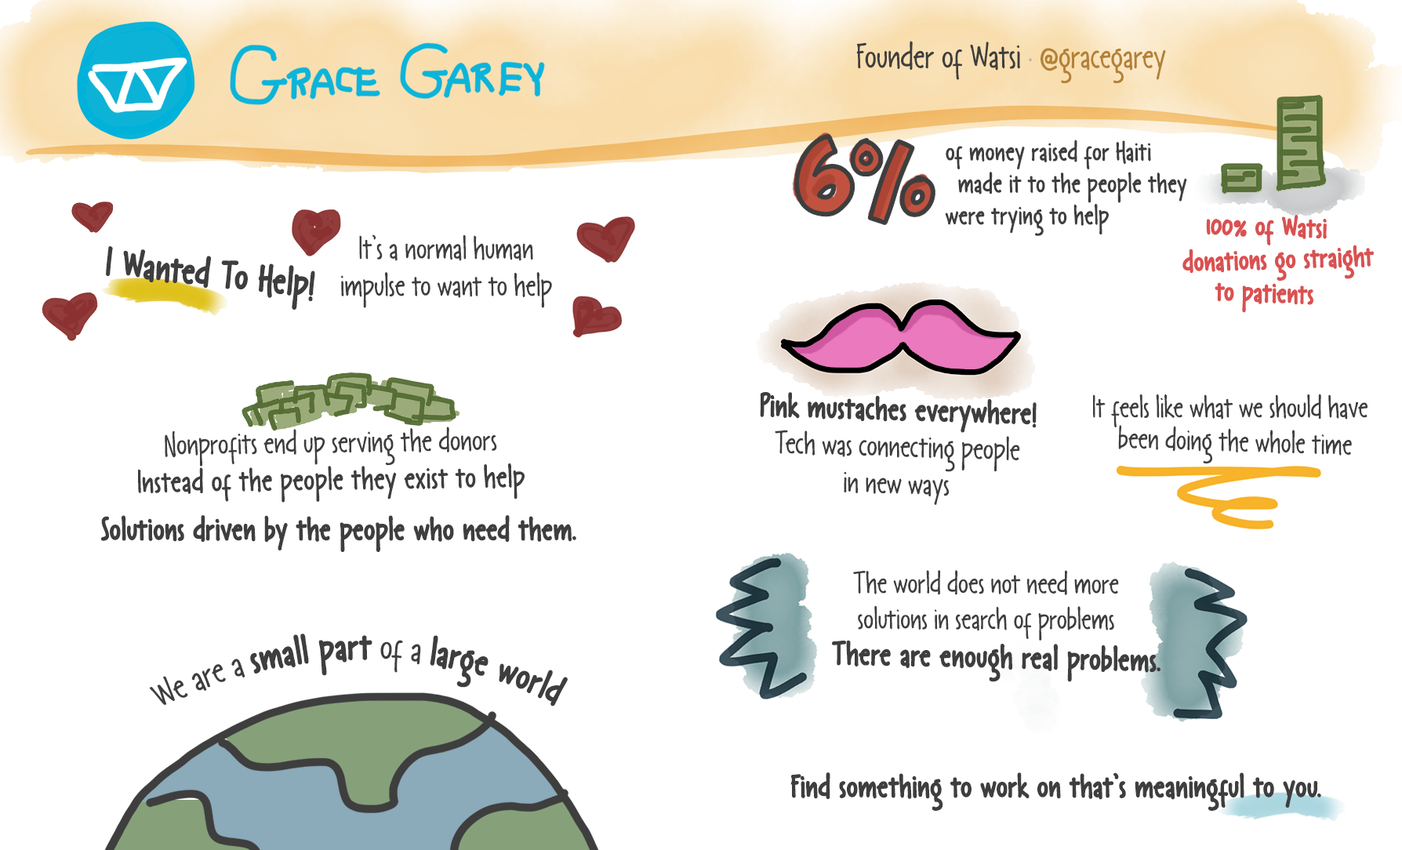
<style>
.page{position:relative;width:1402px;height:850px;background:#ffffff}
.page>*{position:absolute;margin:0}
.t1{font:34.8px "LangoPx-Regular";color:#3e3e3e}
.t2{font:34.8px "LangoPx-Regular";color:#b3b3b3}
.t3{font:34.8px "LangoPx-Regular";color:#b38137}
.t4{font:93.6px "KBSticktoIt";color:#3e3e3e}
.t5{font:26.6px "LangoPx-Bold";color:#3e3e3e}
.t6{font:27.7px "LangoPxFat-Regular";color:#da5151}
.t7{font:30.9px "LangoPx-Regular";color:#3e3e3e}
.t8{font:37.1px "LangoPxFat-Regular";color:#3e3e3e}
.t9{font:30.9px "LangoPxFat-Regular";color:#3e3e3e}
.t10{font:30px "LangoPx-Regular";color:#3e3e3e}
.t11{font:30.9px "LangoPx-Bold";color:#3e3e3e}
.t12{font:29.7px "LangoPx-Regular";color:#3e3e3e}
.t13{font:37.1px "LangoPx-Regular";color:#3e3e3e}
.t14{font:31.6px "LangoPxFat-Regular";color:#3e3e3e}
</style>
<div class="page">
<p class="t1" style="left:857px;top:41px;width:309px;height:43px">Founder of Watsi<span class="t2"> · </span><span class="t3">@gracegarey</span></p>
<p class="t4" style="left:795px;top:134px;width:141px;height:91px">6%</p>
<p class="t5" style="left:945px;top:140px;width:243px;height:96px">of money raised for Haiti<br>  made it to the people they<br>were trying to help</p>
<p class="t6" style="left:1206px;top:215px;width:121px;height:98px;text-align:center;rotate:2deg">100% of Watsi<br><br>to patients</p>
<p class="t7" style="left:340px;top:235px;width:212px;height:73px;text-align:center">It’s a normal human<br>impulse to want to help</p>
<p class="t6" style="left:1183px;top:245px;width:191px;height:36px;rotate:-2deg">donations go straight</p>
<p class="t8" style="left:106px;top:246px;width:209px;height:64px;rotate:6deg">I Wanted To Help!</p>
<p class="t7" style="left:760px;top:392px;width:277px;height:113px;text-align:center;rotate:2deg"><span class="t9">Pink mustaches everywhere!<br></span>Tech was connecting people<br>in new ways</p>
<p class="t10" style="left:1093px;top:394px;width:275px;height:34px">It feels like what we should have</p>
<p class="t10" style="left:1119px;top:425px;width:233px;height:39px;rotate:2deg">been doing the whole time</p>
<p class="t11" style="left:138px;top:427px;width:387px;height:76px;text-align:center;rotate:-1deg"><span class="t7">Nonprofits end up serving the donors<br></span>Instead of the people they exist to help</p>
<p class="t9" style="left:101px;top:515px;width:476px;height:37px">Solutions driven by the people who need them.</p>
<p class="t12" style="left:853px;top:570px;width:266px;height:71px;text-align:center">The world does not need more<br>solutions in search of problems</p>
<p class="t8" style="left:150px;top:634px;width:418px;height:73px;text-align:center"><span class="t13">We are a </span>small part<span class="t13"> of a </span>large world</p>
<p class="t14" style="left:832px;top:640px;width:329px;height:42px;rotate:1deg">There are enough real problems.</p>
<p class="t9" style="left:791px;top:773px;width:531px;height:38px">Find something to work on that’s meaningful to you.</p>
</div>
